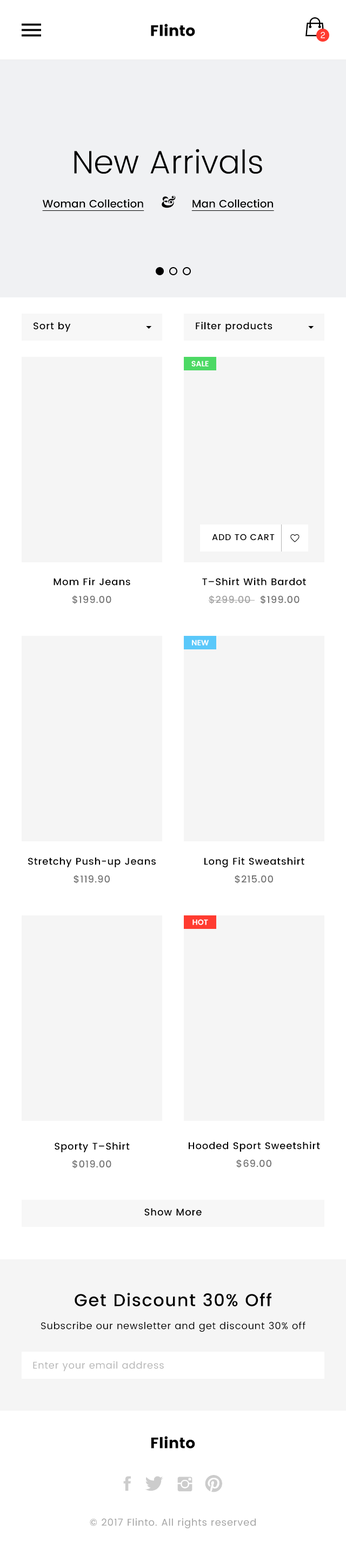
<style>
.page{position:relative;width:346px;height:1568px;background:#f5f5f5}
.page>*{position:absolute;margin:0}
.t1{font:15.1px "Poppins";color:#000000}
.t2{font:8.7px "MaisonNeue-Mono";color:#ffffff;text-transform:uppercase}
.t3{font:32.4px "Poppins-Light";color:#000000}
.t4{font:17.3px "MillerBanner-BlackItalic";color:#000000}
.t5{font:10.8px "Poppins-Medium";color:#000000;text-decoration:underline}
.t6{font:9.7px "Poppins-Medium";letter-spacing:0.05em;color:#000000}
.t7{font:7.6px "Poppins-SemiBold";color:#ffffff;text-transform:uppercase}
.t8{font:8.7px "Poppins-Medium";letter-spacing:0.05em;color:#000000;text-transform:uppercase}
.t9{font:9.7px "Poppins-Medium";letter-spacing:0.05em;color:#737373}
.t10{font:9.7px "Poppins-Medium";letter-spacing:0.05em;color:#a3a3a3}
.t11{font:17.3px "Poppins-Medium";letter-spacing:0.05em;color:#000000}
.t12{font:9.7px "Poppins-Regular";letter-spacing:0.05em;color:#000000}
.t13{font:9.7px "Poppins-Regular";letter-spacing:0.05em;color:#b8b8b8}
.t14{font:9.7px "Poppins-Regular";letter-spacing:0.05em;color:#a3a3a3}
</style>
<div class="page">
<p class="t1" style="left:151px;top:24px;width:44px;height:12px">Flinto</p>
<p class="t2" style="left:321px;top:32px;width:4px;height:6px">2</p>
<p class="t3" style="left:74px;top:149px;width:188px;height:25px">New Arrivals</p>
<p class="t4" style="left:162px;top:196px;width:14px;height:12px">&amp;</p>
<p class="t5" style="left:42px;top:199px;width:102px;height:12px">Woman Collection</p>
<p class="t5" style="left:191px;top:199px;width:83px;height:12px">Man Collection</p>
<p class="t6" style="left:34px;top:322px;width:37px;height:10px">Sort by</p>
<p class="t6" style="left:196px;top:322px;width:77px;height:10px">Filter products</p>
<p class="t7" style="left:191px;top:361px;width:18px;height:6px">Sale</p>
<p class="t8" style="left:212px;top:534px;width:63px;height:6px">Add to Cart</p>
<p class="t6" style="left:54px;top:577px;width:76px;height:9px">Mom Fir Jeans</p>
<p class="t6" style="left:202px;top:577px;width:104px;height:9px">T–Shirt With Bardot</p>
<p class="t9" style="left:72px;top:595px;width:39px;height:9px">$199.00</p>
<p class="t10" style="left:208px;top:595px;width:47px;height:9px">$299.00</p>
<p class="t9" style="left:261px;top:595px;width:39px;height:9px">$199.00</p>
<p class="t7" style="left:192px;top:640px;width:17px;height:6px">new</p>
<p class="t6" style="left:28px;top:858px;width:128px;height:9px">Stretchy Push-up Jeans</p>
<p class="t6" style="left:204px;top:857px;width:100px;height:11px">Long Fit Sweatshirt</p>
<p class="t9" style="left:74px;top:875px;width:36px;height:8px">$119.90</p>
<p class="t9" style="left:235px;top:875px;width:38px;height:8px">$215.00</p>
<p class="t7" style="left:192px;top:919px;width:16px;height:6px">hot</p>
<p class="t6" style="left:55px;top:1142px;width:75px;height:10px">Sporty T–Shirt</p>
<p class="t6" style="left:189px;top:1141px;width:131px;height:11px">Hooded Sport Sweetshirt</p>
<p class="t9" style="left:72px;top:1160px;width:39px;height:8px">$019.00</p>
<p class="t9" style="left:236px;top:1159px;width:35px;height:9px">$69.00</p>
<p class="t6" style="left:144px;top:1208px;width:58px;height:8px">Show More</p>
<p class="t11" style="left:75px;top:1293px;width:196px;height:13px">Get Discount 30% Off</p>
<p class="t12" style="left:41px;top:1321px;width:264px;height:11px">Subscribe our newsletter and get discount 30% off</p>
<p class="t13" style="left:33px;top:1361px;width:131px;height:10px">Enter your email address</p>
<p class="t1" style="left:151px;top:1436px;width:44px;height:13px">Flinto</p>
<p class="t14" style="left:90px;top:1518px;width:166px;height:11px">© 2017 Flinto. All rights reserved</p>
</div>
